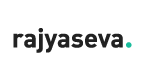
<style>
.page{position:relative;width:146px;height:80px;background:#ffffff}
.page>*{position:absolute;margin:0}
.t1{font:26px "DIN-BoldAlternate";color:#222222}
.t2{font:30px "DIN-BoldAlternate";color:#1abc9c}
</style>
<div class="page">
<p class="t1" style="left:13px;top:28px;width:119px;height:25px">rajyaseva<span class="t2">.</span></p>
</div>
